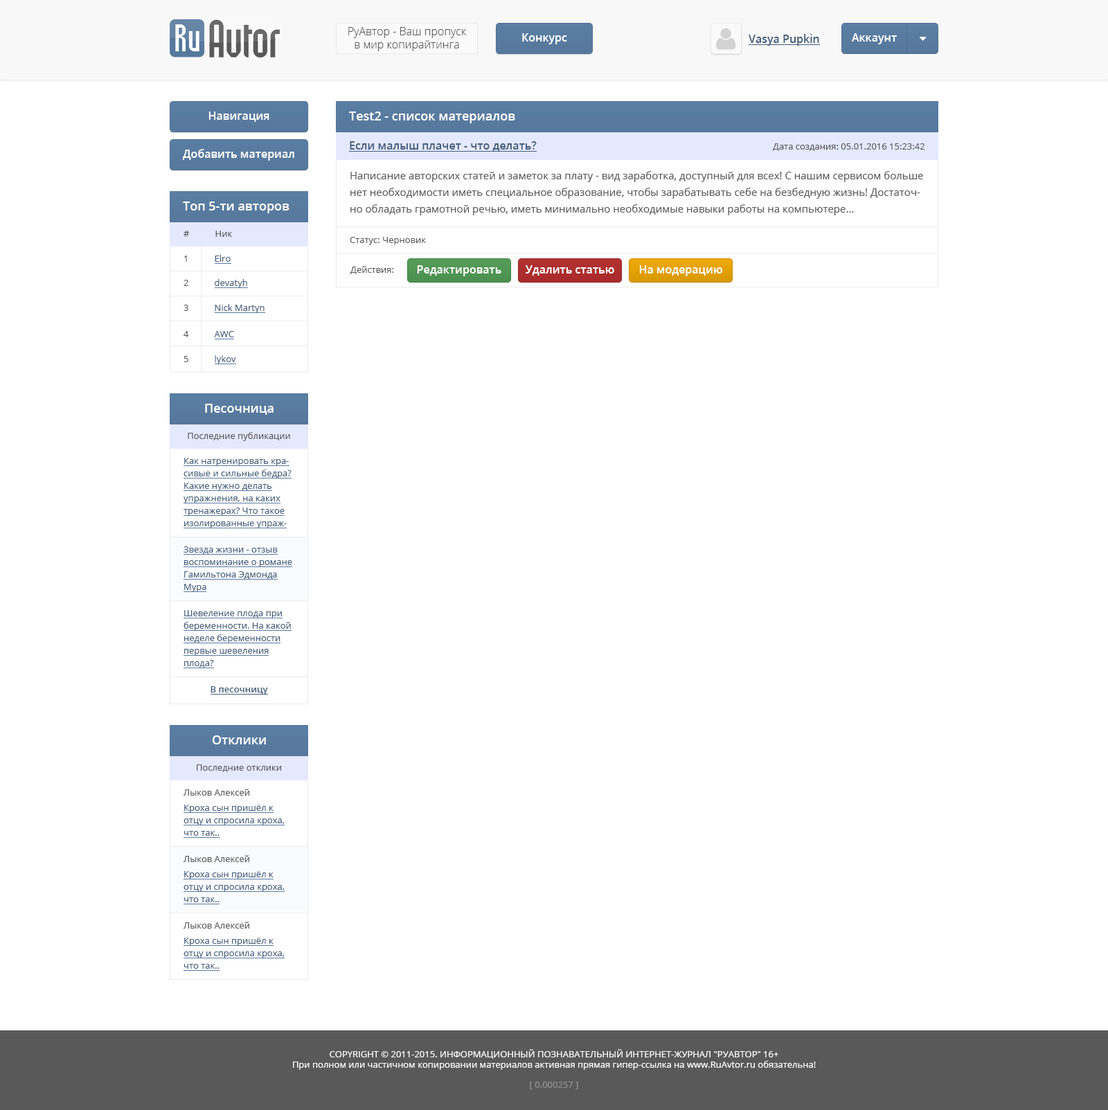
<style>
.page{position:relative;width:1108px;height:1110px;background:#ffffff}
.page>*{position:absolute;margin:0}
.t1{font:11.1px "OpenSans-Light";color:#595959}
.t2{font:11.1px "OpenSans-Semibold";color:#ffffff}
.t3{font:11.1px "OpenSans-Semibold";color:#455f7c}
.t4{font:12.5px "OpenSans-Semibold";color:#ffffff}
.t5{font:9px "OpenSans";color:#595959}
.t6{font:10.4px/16.6px "OpenSans";color:#595959}
.t7{font:9px "OpenSans";color:#455f7c}
.t8{font:9px/12.5px "OpenSans";color:#455f7c}
.t9{font:9px "OpenSans-Semibold";color:#455f7c}
.t10{font:9px "OpenSans";color:#ffffff}
.t11{font:9px "OpenSans";color:#929292}
</style>
<div class="page">
<p class="t1" style="left:348px;top:27px;width:119px;height:24px;text-align:center">РуАвтор - Ваш пропуск<br>в мир копирайтинга</p>
<p class="t2" style="left:522px;top:33px;width:45px;height:11px">Конкурс</p>
<p class="t3" style="left:748px;top:34px;width:71px;height:12px">Vasya Pupkin</p>
<p class="t2" style="left:852px;top:33px;width:45px;height:11px">Аккаунт</p>
<p class="t2" style="left:208px;top:111px;width:61px;height:11px">Навигация</p>
<p class="t4" style="left:349px;top:111px;width:166px;height:12px">Test2 - список материалов</p>
<p class="t2" style="left:183px;top:149px;width:111px;height:12px">Добавить материал</p>
<p class="t3" style="left:350px;top:141px;width:187px;height:11px">Если малыш плачет - что делать?</p>
<p class="t5" style="left:773px;top:143px;width:152px;height:8px">Дата создания: 05.01.2016 15:23:42</p>
<p class="t6" style="left:350px;top:171px;width:573px;height:44px">Написание авторских статей и заметок за плату - вид заработка, доступный для всех! С нашим сервисом больше нет необходимости иметь специальное образование, чтобы зарабатывать себе на безбедную жизнь! Достаточно обладать грамотной речью, иметь минимально необходимые навыки работы на компьютере...</p>
<p class="t4" style="left:183px;top:201px;width:106px;height:12px">Топ 5-ти авторов</p>
<p class="t5" style="left:183px;top:231px;width:50px;height:6px">#           Ник</p>
<p class="t5" style="left:350px;top:237px;width:76px;height:8px">Статус: Черновик</p>
<p class="t7" style="left:184px;top:255px;width:47px;height:7px"><span class="t5">1           </span>Elro</p>
<p class="t5" style="left:350px;top:266px;width:44px;height:8px">Действия:</p>
<p class="t2" style="left:417px;top:265px;width:84px;height:11px">Редактировать</p>
<p class="t2" style="left:525px;top:265px;width:89px;height:11px">Удалить статью</p>
<p class="t2" style="left:639px;top:265px;width:83px;height:11px">На модерацию</p>
<p class="t7" style="left:183px;top:279px;width:64px;height:9px"><span class="t5">2           </span>devatyh</p>
<p class="t7" style="left:183px;top:304px;width:81px;height:9px"><span class="t5">3           </span>Nick Martyn</p>
<p class="t7" style="left:183px;top:331px;width:51px;height:6px"><span class="t5">4           </span>AWC</p>
<p class="t7" style="left:183px;top:355px;width:53px;height:9px"><span class="t5">5           </span>lykov</p>
<p class="t4" style="left:205px;top:404px;width:68px;height:11px">Песочница</p>
<p class="t5" style="left:188px;top:432px;width:102px;height:9px">Последние публикации</p>
<p class="t8" style="left:183px;top:458px;width:108px;height:70px">Как натренировать красивые и сильные бедра? Какие нужно делать упражнения, на каких тренажерах? Что такое изолированные упражнения и для чего они нужны?</p>
<p class="t8" style="left:183px;top:546px;width:109px;height:46px">Звезда жизни - отзыв воспоминание о романе Гамильтона Эдмонда Мура</p>
<p class="t8" style="left:183px;top:610px;width:108px;height:57px">Шевеление плода при беременности. На какой неделе беременности первые шевеления плода?</p>
<p class="t9" style="left:210px;top:686px;width:58px;height:8px">В песочницу</p>
<p class="t4" style="left:213px;top:735px;width:53px;height:9px">Отклики</p>
<p class="t5" style="left:197px;top:764px;width:84px;height:8px">Последние отклики</p>
<p class="t5" style="left:183px;top:789px;width:66px;height:6px">Лыков Алексей</p>
<p class="t8" style="left:183px;top:804px;width:102px;height:32px">Кроха сын пришёл к отцу и спросила кроха, что так..</p>
<p class="t5" style="left:183px;top:855px;width:66px;height:7px">Лыков Алексей</p>
<p class="t8" style="left:183px;top:871px;width:102px;height:31px">Кроха сын пришёл к отцу и спросила кроха, что так..</p>
<p class="t5" style="left:183px;top:921px;width:66px;height:7px">Лыков Алексей</p>
<p class="t8" style="left:183px;top:937px;width:102px;height:32px">Кроха сын пришёл к отцу и спросила кроха, что так..</p>
<p class="t10" style="left:293px;top:1049px;width:523px;height:21px;text-align:center">COPYRIGHT © 2011-2015. ИНФОРМАЦИОННЫЙ ПОЗНАВАТЕЛЬНЫЙ ИНТЕРНЕТ-ЖУРНАЛ "РУАВТОР" 16+<br>При полном или частичном копировании материалов активная прямая гипер-ссылка на www.RuAvtor.ru обязательна!</p>
<p class="t11" style="left:530px;top:1081px;width:48px;height:8px">[ 0.000257 ]</p>
</div>
